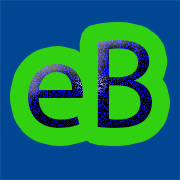
<style>
.page{position:relative;width:180px;height:180px;background:#014693}
.page>*{position:absolute;margin:0}
.t1{font:128.2px "MyriadPro-Regular"}
</style>
<div class="page">
<p class="t1" style="left:28px;top:40px;width:124px;height:88px">eB</p>
</div>
